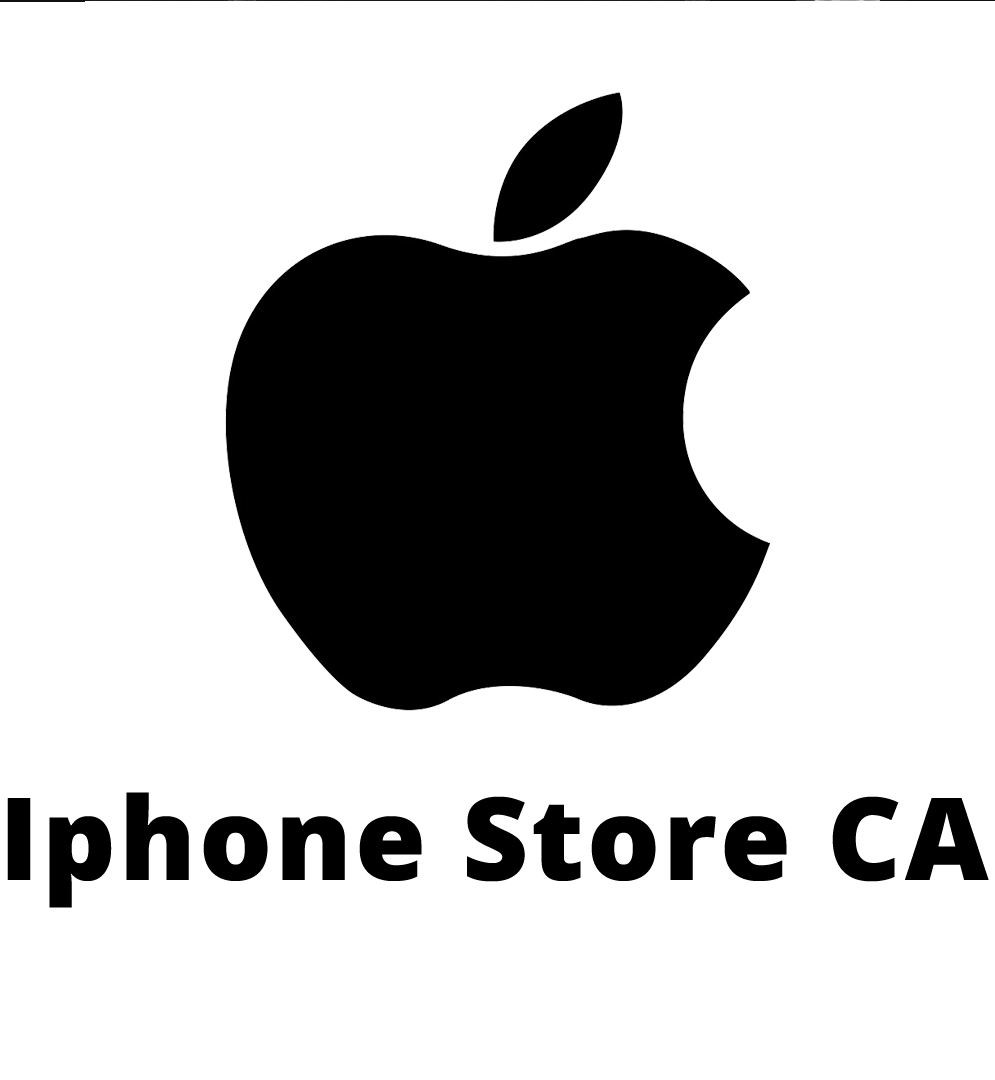
<style>
.page{position:relative;width:995px;height:1080px;background:#ffffff}
.page>*{position:absolute;margin:0}
.t1{font:115px "OpenSansRoman-ExtraBold";letter-spacing:0.025em;color:#000000}
</style>
<div class="page">
<p class="t1" style="left:7px;top:791px;width:982px;height:116px">Iphone Store CA</p>
</div>
